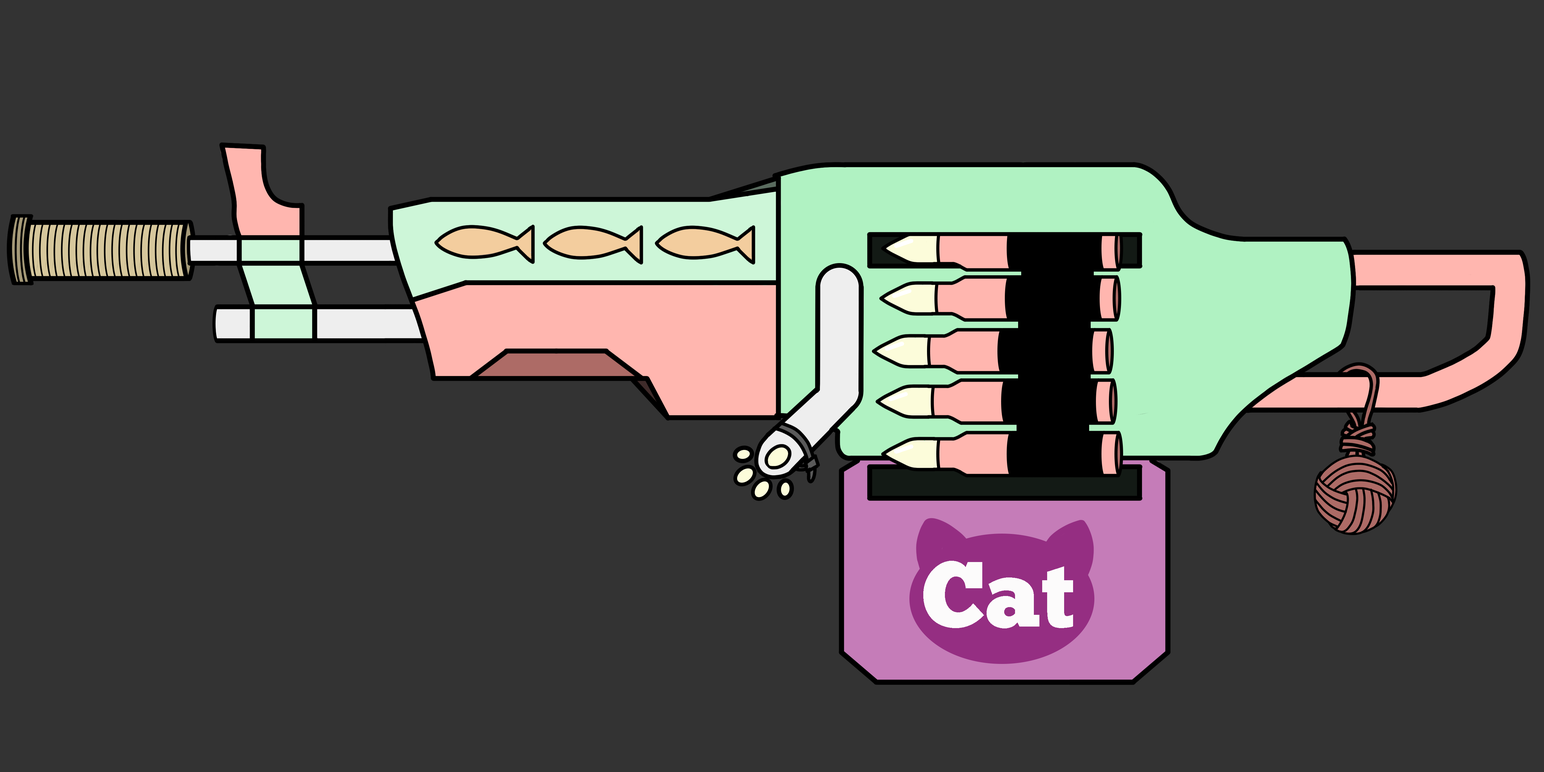
<style>
.page{position:relative;width:1544px;height:772px;background:#333333}
.page>*{position:absolute;margin:0}
.t1{font:92.7px "ChunkFiveEx";color:#fcfbfb}
</style>
<div class="page">
<p class="t1" style="left:923px;top:561px;width:150px;height:68px">Catrc</p>
</div>
